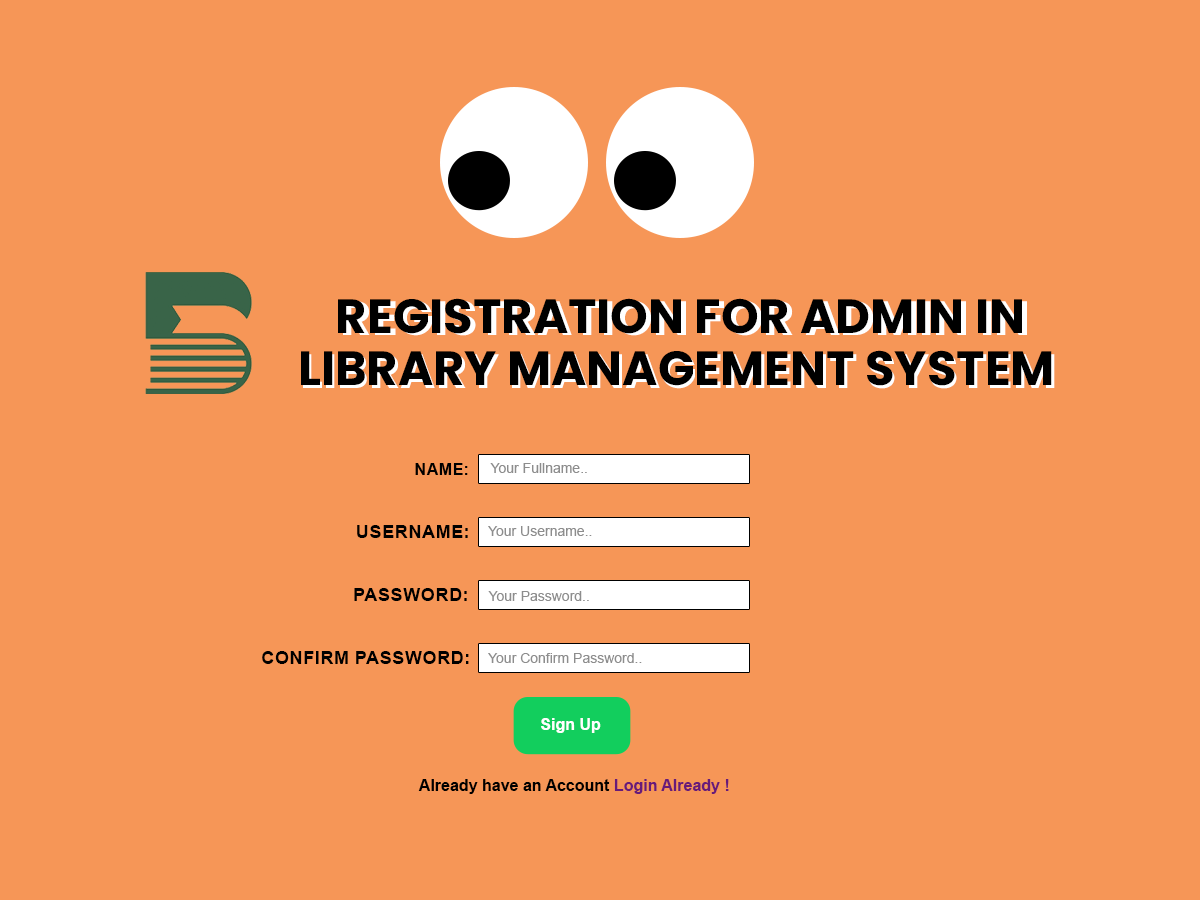
<style>
.page{position:relative;width:1200px;height:900px;background:#f69657}
.page>*{position:absolute;margin:0}
.t1{font:48px "Poppins-Bold";color:#000000;text-transform:uppercase}
.t2{font:16px "Arial-BoldMT";color:#000000;text-transform:uppercase}
.t3{font:14px "ArialMT";color:#8d8d8d}
.t4{font:18px "Arial-BoldMT";color:#000000;text-transform:uppercase}
.t5{font:16px "Arial-BoldMT";color:#ffffff}
.t6{font:16px "Arial-BoldMT";color:#000000}
.t7{font:16px "Arial-BoldMT";color:#681a79}
</style>
<div class="page">
<p class="t1" style="left:338px;top:298px;width:684px;height:36px">ReGISTRATION FOR ADMIN IN</p>
<p class="t1" style="left:301px;top:350px;width:751px;height:36px">LIBRARY MANAGEMENT SYSTEM</p>
<p class="t1" style="left:303px;top:353px;width:752px;height:36px">LIBRARY MANAGEMENT SYSTEM</p>
<p class="t2" style="left:415px;top:463px;width:53px;height:12px">NAME:</p>
<p class="t3" style="left:490px;top:463px;width:97px;height:10px">Your Fullname..</p>
<p class="t4" style="left:357px;top:525px;width:111px;height:13px">USERNAME:</p>
<p class="t3" style="left:488px;top:526px;width:104px;height:10px">Your Username..</p>
<p class="t4" style="left:354px;top:588px;width:113px;height:13px">PASSWORD:</p>
<p class="t3" style="left:488px;top:591px;width:101px;height:10px">Your Password..</p>
<p class="t4" style="left:262px;top:651px;width:207px;height:13px">CONFIRM PASSWORD:</p>
<p class="t3" style="left:488px;top:653px;width:154px;height:10px">Your Confirm Password..</p>
<p class="t5" style="left:541px;top:718px;width:60px;height:15px">Sign Up</p>
<p class="t6" style="left:418px;top:779px;width:311px;height:15px">Already have an Account <span class="t7">Login Already !</span></p>
</div>
